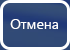
<style>
.page{position:relative;width:70px;height:50px}
.page>*{position:absolute;margin:0}
.t1{font:14px "SegoeUI";color:#ffffff}
</style>
<div class="page">
<p class="t1" style="left:10px;top:19px;width:48px;height:10px">Отмена</p>
</div>
